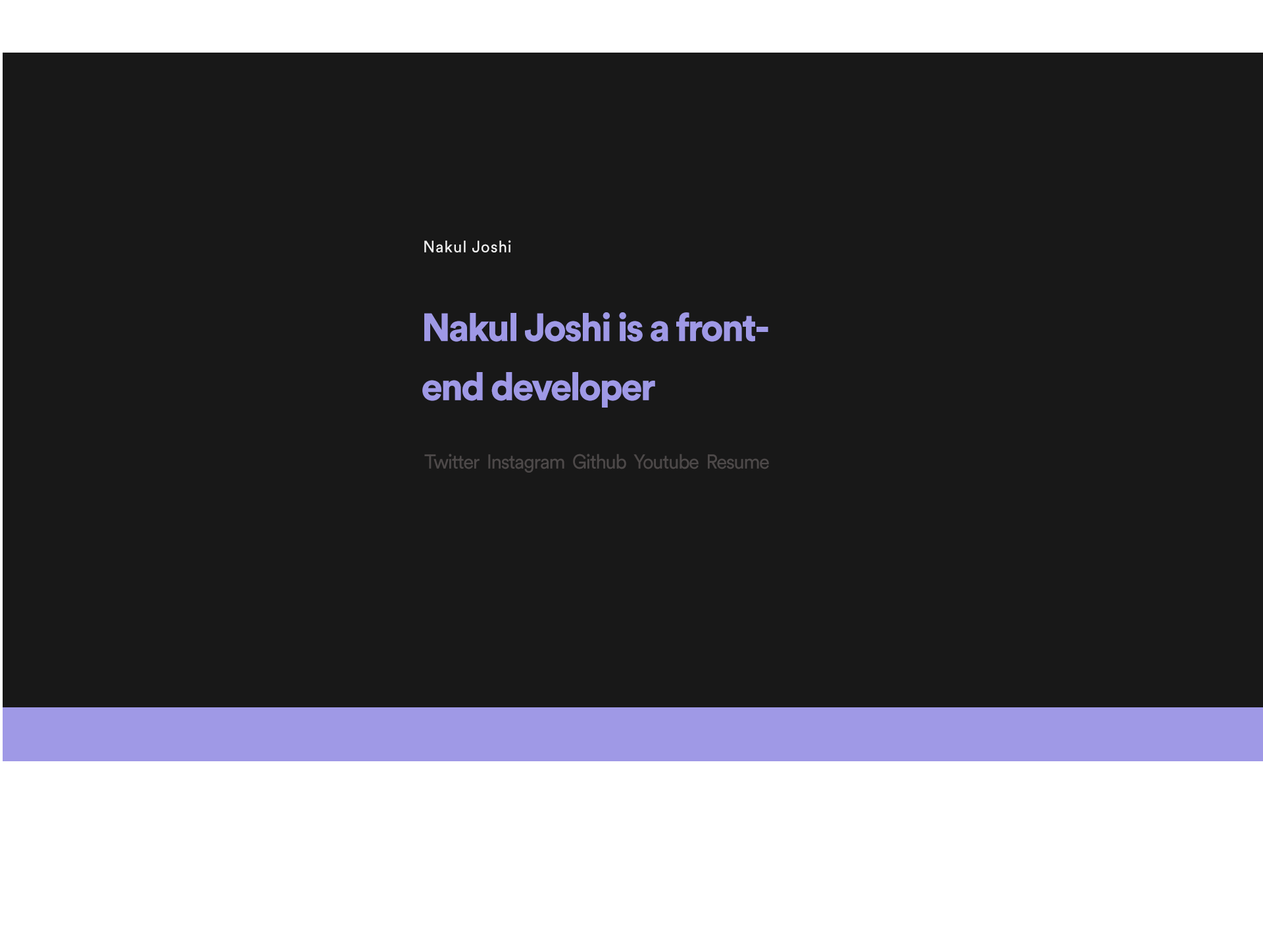
<style>
.page{position:relative;width:1263px;height:944px;background:#181818}
.page>*{position:absolute;margin:0}
.t1{font:16.2px "CircularStd-Book";letter-spacing:0.045em;color:#f0f0f0;scale:0.96 1}
.t2{font:39px "CircularStd-Black";letter-spacing:-0.05em;color:#9f99e6}
.t3{font:20px "CircularStd-Book";letter-spacing:-0.05em;color:#4d4949;scale:0.96 1}
</style>
<div class="page">
<p class="t1" style="left:424px;top:240px;width:87px;height:13px">Nakul Joshi</p>
<p class="t2" style="left:422px;top:312px;width:346px;height:96px">Nakul Joshi is a front-<br>end developer</p>
<p class="t3" style="left:424px;top:454px;width:345px;height:19px">Twitter  Instagram  Github  Youtube  Resume</p>
</div>
